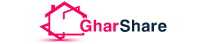
<style>
.page{position:relative;width:200px;height:44px;background:#ffffff}
.page>*{position:absolute;margin:0}
.t1{font:18.9px "AlQalamShamil";letter-spacing:0.01em;color:#082642}
.t2{font:18.9px "AlQalamShamil";letter-spacing:0.01em;color:#ff005d}
</style>
<div class="page">
<p class="t1" style="left:80px;top:19px;width:87px;height:13px"><span class="t2">Ghar</span>Share</p>
</div>
